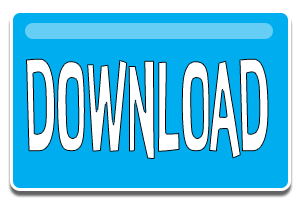
<style>
.page{position:relative;width:300px;height:200px;background:#00aeef}
.page>*{position:absolute;margin:0}
.t1{font:132.6px "InsideOut";color:#ffffff;scale:0.49 1}
</style>
<div class="page">
<p class="t1" style="left:26px;top:58px;width:243px;height:101px">download</p>
</div>
